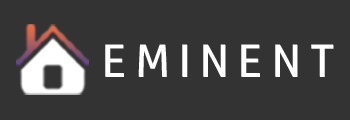
<style>
.page{position:relative;width:350px;height:120px;background:#333333}
.page>*{position:absolute;margin:0}
.t1{font:47.1px "HPSimplified-Regular";letter-spacing:0.2em;color:#ffffff}
</style>
<div class="page">
<p class="t1" style="left:105px;top:44px;width:229px;height:33px">EMINENT</p>
</div>
